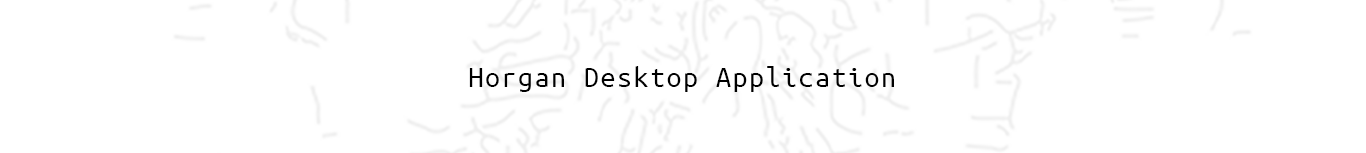
<style>
.page{position:relative;width:1366px;height:153px;background:#ffffff}
.page>*{position:absolute;margin:0}
.t1{font:30px "UbuntuMono-Regular";letter-spacing:0.05em;color:#000000}
</style>
<div class="page">
<p class="t1" style="left:469px;top:66px;width:425px;height:26px">Horgan Desktop Application</p>
</div>
